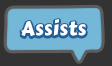
<style>
.page{position:relative;width:112px;height:66px;background:#333333}
.page>*{position:absolute;margin:0}
.t1{font:20px "CarterOne";letter-spacing:0.025em;color:#ffffff}
</style>
<div class="page">
<p class="t1" style="left:21px;top:19px;width:65px;height:17px">Assists</p>
</div>
